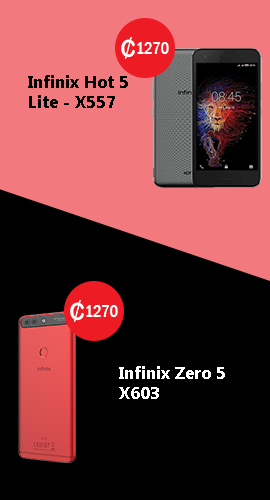
<style>
.page{position:relative;width:270px;height:500px;background:#000000}
.page>*{position:absolute;margin:0}
.t1{font:16.7px "FranklinGothic-MediumCond";color:#ffffff}
.t2{font:16.7px "Gadugi-Bold";color:#000000}
.t3{font:16.7px "Gadugi-Bold";color:#ffffff}
</style>
<div class="page">
<p class="t1" style="left:137px;top:42px;width:32px;height:12px">1270</p>
<p class="t2" style="left:28px;top:75px;width:100px;height:33px">Infinix Hot 5 Lite - X557</p>
<p class="t1" style="left:86px;top:305px;width:32px;height:12px">1270</p>
<p class="t3" style="left:119px;top:366px;width:106px;height:33px">Infinix Zero 5 X603</p>
</div>
